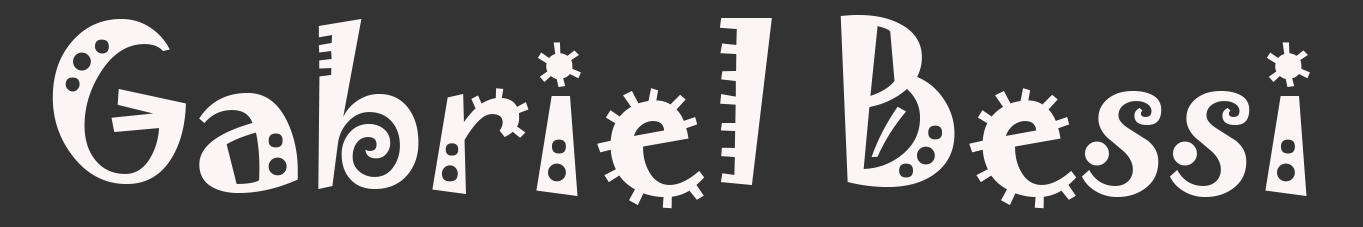
<style>
.page{position:relative;width:1363px;height:227px;background:#333333}
.page>*{position:absolute;margin:0}
.t1{font:200px "Jokerman-Regular";color:#fcf5f6}
</style>
<div class="page">
<p class="t1" style="left:52px;top:15px;width:1258px;height:194px">Gabriel Bessi</p>
</div>
